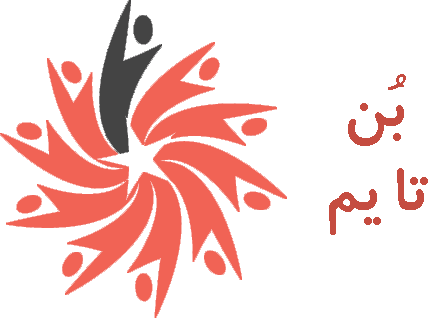
<style>
.page{position:relative;width:439px;height:318px;background:#ffffff}
.page>*{position:absolute;margin:0}
.t1{font:70px "BKoodakBold";letter-spacing:0.05em;color:#c54c40}
</style>
<div class="page">
<p class="t1" style="left:329px;top:74px;width:99px;height:161px;text-align:center">بُن تایم</p>
</div>
